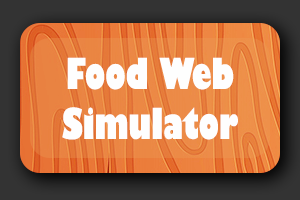
<style>
.page{position:relative;width:300px;height:200px}
.page>*{position:absolute;margin:0}
.t1{font:41.7px "GillSans-UltraBoldCondensed";color:#fefefe}
</style>
<div class="page">
<p class="t1" style="left:62px;top:57px;width:176px;height:83px;text-align:center">Food Web<br>Simulator</p>
</div>
